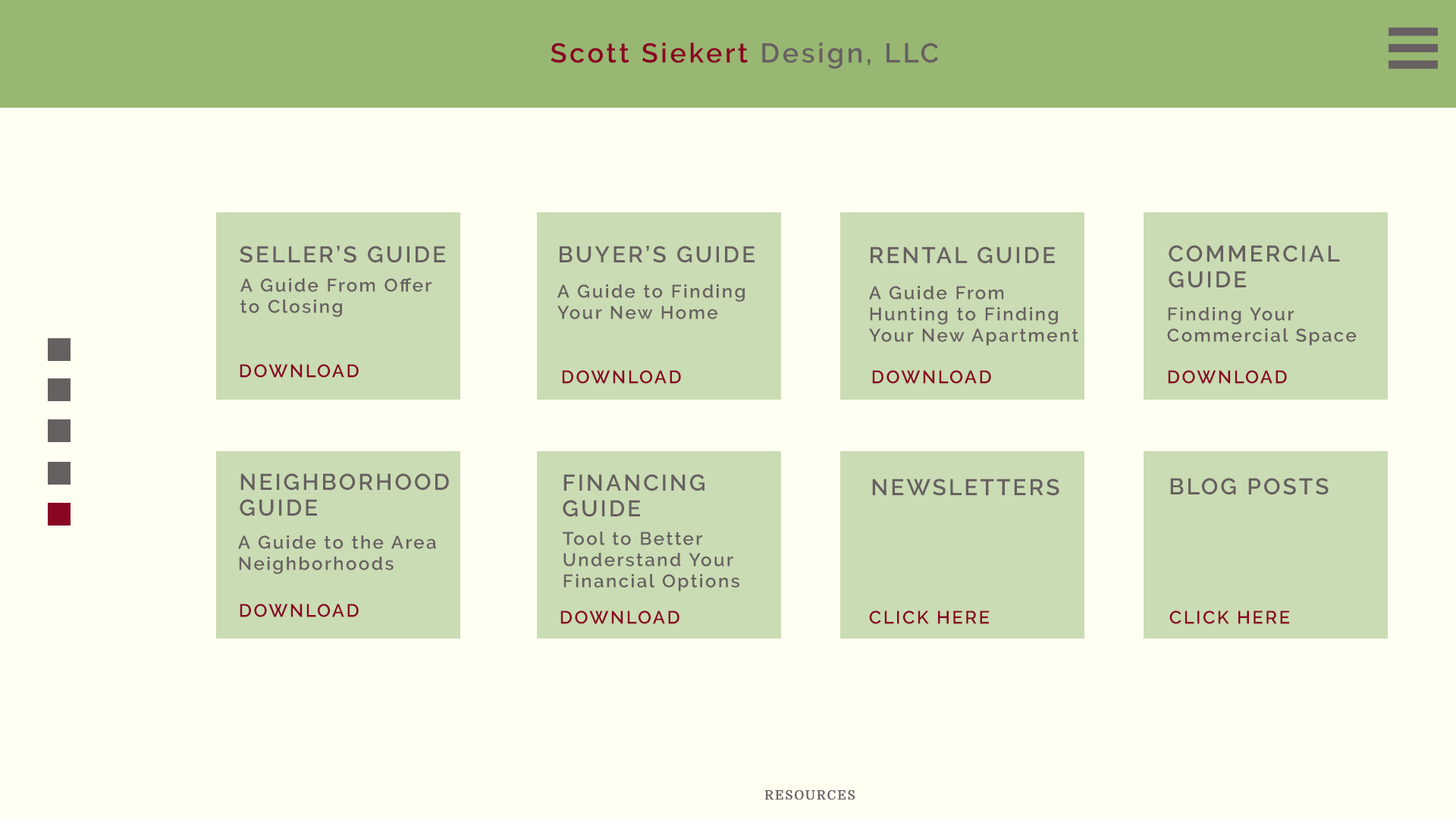
<style>
.page{position:relative;width:1456px;height:819px;background:#fffff2}
.page>*{position:absolute;margin:0}
.t1{font:27.3px "Raleway-SemiBold";letter-spacing:0.1em;color:#890623}
.t2{font:27.3px "Raleway-SemiBold";letter-spacing:0.1em;color:#676061}
.t3{font:22.7px "Raleway-SemiBold";letter-spacing:0.1em;color:#676061}
.t4{font:22.7px/25.8px "Raleway-SemiBold";letter-spacing:0.1em;color:#676061}
.t5{font:18.2px/21.2px "Raleway-SemiBold";letter-spacing:0.1em;color:#676061}
.t6{font:18.2px "Raleway-SemiBold";letter-spacing:0.1em;color:#890623}
.t7{font:12.8px "Domine-Bold";letter-spacing:0.1em;color:#676061}
</style>
<div class="page">
<p class="t1" style="left:551px;top:42px;width:388px;height:27px">Scott Siekert<span class="t2"> Design, LLC</span></p>
<p class="t3" style="left:240px;top:246px;width:205px;height:17px">SELLER’S GUIDE</p>
<p class="t3" style="left:560px;top:246px;width:195px;height:17px">BUYER’S GUIDE</p>
<p class="t4" style="left:1169px;top:245px;width:171px;height:43px">COMMERCIAL <br>GUIDE</p>
<p class="t3" style="left:871px;top:246px;width:184px;height:18px">RENTAL GUIDE</p>
<p class="t5" style="left:240px;top:278px;width:191px;height:39px">A Guide From Offer <br>to Closing</p>
<p class="t5" style="left:557px;top:284px;width:188px;height:35px">A Guide to Finding <br>Your New Home</p>
<p class="t5" style="left:869px;top:286px;width:209px;height:60px">A Guide From <br>Hunting to Finding <br>Your New Apartment</p>
<p class="t5" style="left:1167px;top:307px;width:190px;height:39px">Finding Your <br>Commercial Space</p>
<p class="t6" style="left:240px;top:364px;width:119px;height:14px">DOWNLOAD</p>
<p class="t6" style="left:562px;top:370px;width:119px;height:14px">DOWNLOAD</p>
<p class="t6" style="left:872px;top:370px;width:119px;height:14px">DOWNLOAD</p>
<p class="t6" style="left:1168px;top:370px;width:119px;height:14px">DOWNLOAD</p>
<p class="t4" style="left:240px;top:473px;width:209px;height:43px">NEIGHBORHOOD <br>GUIDE</p>
<p class="t4" style="left:563px;top:474px;width:141px;height:43px">FINANCING <br>GUIDE</p>
<p class="t3" style="left:872px;top:479px;width:187px;height:17px">NEWSLETTERS</p>
<p class="t3" style="left:1170px;top:478px;width:159px;height:17px">BLOG POSTS</p>
<p class="t5" style="left:563px;top:532px;width:176px;height:59px">Tool to Better <br>Understand Your <br>Financial Options</p>
<p class="t5" style="left:238px;top:535px;width:198px;height:39px">A Guide to the Area <br>Neighborhoods</p>
<p class="t6" style="left:240px;top:604px;width:119px;height:13px">DOWNLOAD</p>
<p class="t6" style="left:560px;top:610px;width:119px;height:14px">DOWNLOAD</p>
<p class="t6" style="left:869px;top:610px;width:120px;height:14px">CLICK HERE</p>
<p class="t6" style="left:1169px;top:610px;width:120px;height:14px">CLICK HERE</p>
<p class="t7" style="left:764px;top:789px;width:91px;height:11px">RESOURCES</p>
</div>
